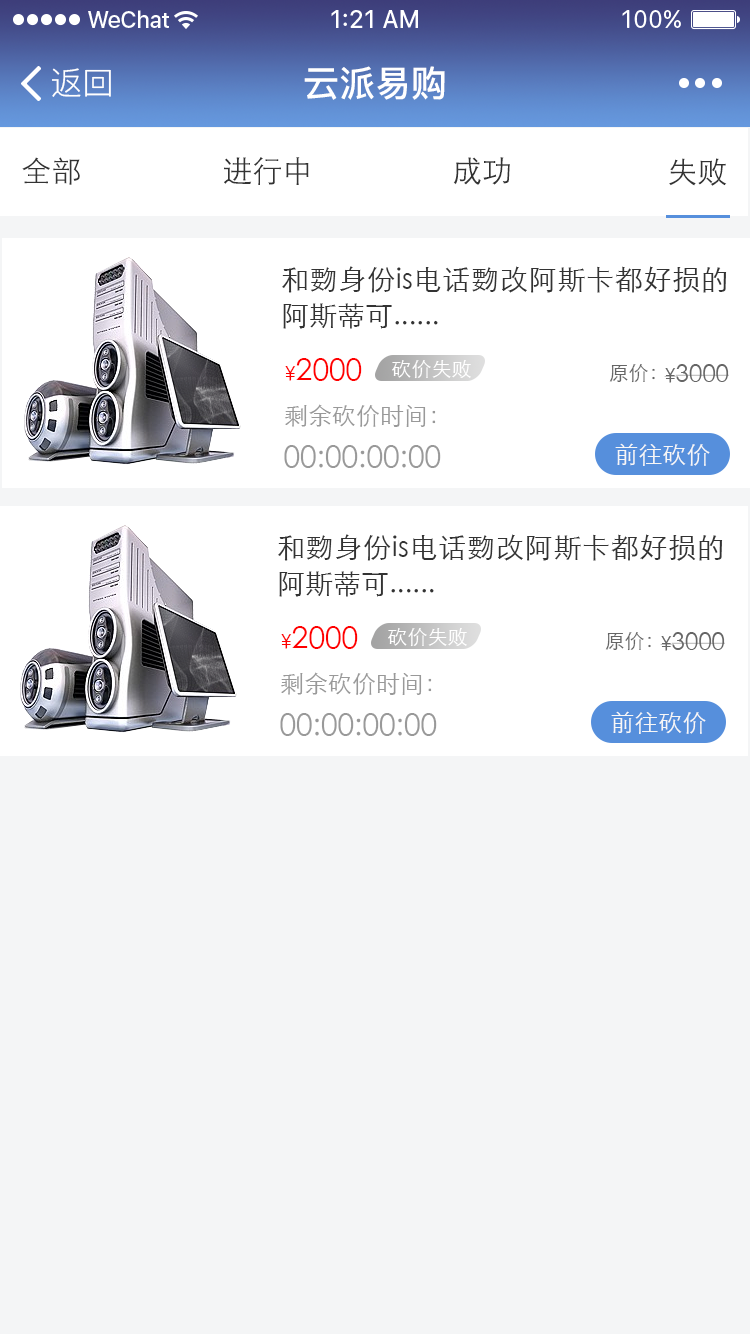
<style>
.page{position:relative;width:750px;height:1334px;background:#f4f5f6}
.page>*{position:absolute;margin:0}
.t1{font:32px "PingFang-SC-Regular";color:#ffffff}
.t2{font:36px "PingFang-SC-Bold";color:#ffffff}
.t3{font:30px "STXihei";color:#333333}
.t4{font:28px/36px "STXihei";color:#333333}
.t5{font:30px "STXihei";color:#ff0000}
.t6{font:20px "STXihei";color:#ff0000}
.t7{font:20px "STXihei";color:#ffffff}
.t8{font:20px "STXihei";color:#666666}
.t9{font:24px "STXihei";color:#666666}
.t10{font:24px "STXihei";color:#999999}
.t11{font:30px "STXihei";color:#999999}
.t12{font:24px "STXihei";color:#f7f7f7}
</style>
<div class="page">
<p class="t1" style="left:52px;top:68px;width:59px;height:29px">返回</p>
<p class="t2" style="left:304px;top:66px;width:141px;height:34px">云派易购</p>
<p class="t3" style="left:22px;top:157px;width:58px;height:28px">全部</p>
<p class="t3" style="left:224px;top:157px;width:85px;height:28px">进行中</p>
<p class="t3" style="left:453px;top:157px;width:57px;height:28px">成功</p>
<p class="t3" style="left:669px;top:158px;width:58px;height:28px">失败</p>
<p class="t4" style="left:282px;top:266px;width:445px;height:63px;text-align:justify">和覅身份is电话覅改阿斯卡都好损的阿斯蒂可......</p>
<p class="t5" style="left:285px;top:358px;width:77px;height:23px"><span class="t6">¥</span>2000</p>
<p class="t7" style="left:392px;top:360px;width:79px;height:19px">砍价失败</p>
<p class="t8" style="left:609px;top:364px;width:46px;height:19px">原价：</p>
<p class="t9" style="left:664px;top:364px;width:65px;height:19px"><span class="t8">¥</span>3000</p>
<p class="t10" style="left:285px;top:404px;width:151px;height:23px">剩余砍价时间：</p>
<p class="t11" style="left:284px;top:445px;width:157px;height:23px">00:00:00:00</p>
<p class="t12" style="left:615px;top:443px;width:95px;height:23px">前往砍价</p>
<p class="t4" style="left:278px;top:534px;width:445px;height:63px;text-align:justify">和覅身份is电话覅改阿斯卡都好损的阿斯蒂可......</p>
<p class="t5" style="left:281px;top:626px;width:77px;height:23px"><span class="t6">¥</span>2000</p>
<p class="t7" style="left:388px;top:628px;width:79px;height:19px">砍价失败</p>
<p class="t8" style="left:605px;top:632px;width:46px;height:19px">原价：</p>
<p class="t9" style="left:660px;top:632px;width:65px;height:19px"><span class="t8">¥</span>3000</p>
<p class="t10" style="left:281px;top:672px;width:151px;height:23px">剩余砍价时间：</p>
<p class="t11" style="left:280px;top:713px;width:157px;height:23px">00:00:00:00</p>
<p class="t12" style="left:611px;top:711px;width:95px;height:23px">前往砍价</p>
</div>
